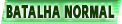
<style>
.page{position:relative;width:122px;height:24px;background:#123e04}
.page>*{position:absolute;margin:0}
.t1{font:16px "RodinNTLGPro-UB";letter-spacing:0.015em;color:#123e04;scale:0.65 1}
</style>
<div class="page">
<p class="t1" style="left:6px;top:5px;width:109px;height:14px">BATALHA NORMAL</p>
</div>
